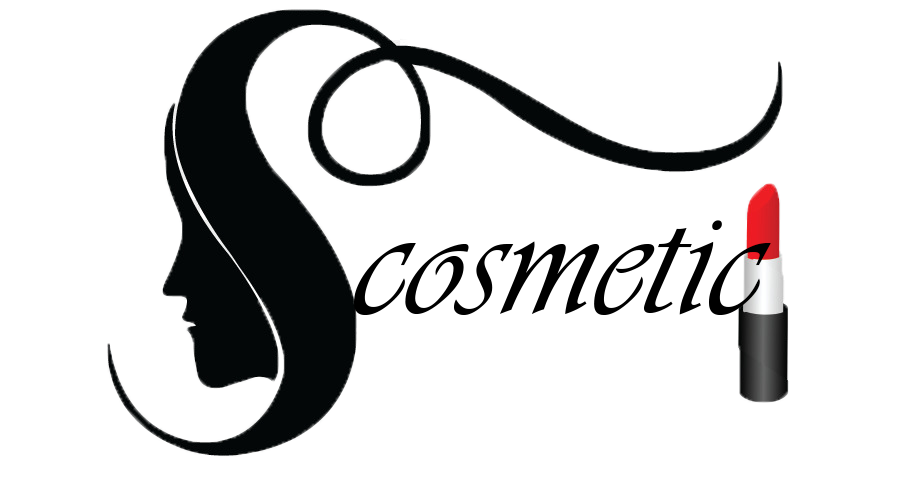
<style>
.page{position:relative;width:900px;height:480px;background:#ffffff}
.page>*{position:absolute;margin:0}
.t1{font:172px "Vivaldii";color:#000000}
</style>
<div class="page">
<p class="t1" style="left:354px;top:220px;width:417px;height:95px">cosmetic</p>
</div>
